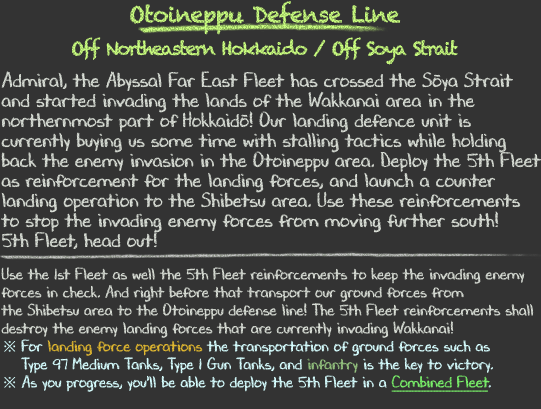
<style>
.page{position:relative;width:541px;height:409px;background:#333333}
.page>*{position:absolute;margin:0}
.t1{font:18px/36px "Chalkduster";letter-spacing:-0.09em}
.t2{font:22px/36px "Chalkduster";letter-spacing:-0.04em}
.t3{font:20px/20px "DJBChalkItUp";color:#d9ded6}
.t4{font:16px/18px "DJBChalkItUp";color:#d9ded6}
.t5{font:16px/18px "TimesNewRomanPSMT";color:#d7feff}
.t6{font:16px/18px "DJBChalkItUp";color:#d7feff}
.t7{font:16px/18px "DJBChalkItUp";color:#dfb731}
.t8{font:16px/18px "DJBChalkItUp";color:#93c07e}
.t9{font:16px/18px "DJBChalkItUp";color:#7bf26b;text-decoration:underline}
</style>
<div class="page">
<p class="t1" style="left:72px;top:1px;width:386px;height:64px;text-align:center"><span class="t2">Otoineppu Defense Line<br></span>Off Northeastern Hokkaido / Off Soya Strait</p>
<p class="t3" style="left:0px;top:71px;width:541px;height:321px">Admiral, the Abyssal Far East Fleet has crossed the Sōya Strait<br>and started invading the lands of the Wakkanai area in the<br>northernmost part of Hokkaidō! Our landing defence unit is<br>currently buying us some time with stalling tactics while holding<br>back the enemy invasion in the Otoineppu area. Deploy the 5th Fleet<br>as reinforcement for the landing forces, and launch a counter<br>landing operation to the Shibetsu area. Use these reinforcements<br>to stop the invading enemy forces from moving further south!<br>5th Fleet, head out!<br><br><span class="t4">Use the 1st Fleet as well the 5th Fleet reinforcements to keep the invading enemy<br>forces in check. And right before that transport our ground forces from<br>the Shibetsu area to the Otoineppu defense line! The 5th Fleet reinforcements shall<br>destroy the enemy landing forces that are currently invading Wakkanai!<br></span><span class="t5">※ </span><span class="t6">For </span><span class="t7">landing force operations</span><span class="t6"> the transportation of ground forces such as<br>　 Type 97 Medium Tanks, Type 1 Gun Tanks, and </span><span class="t8">infantry</span><span class="t6"> is the key to victory.<br></span><span class="t5">※ </span><span class="t6">As you progress, you'll be able to deploy the 5th Fleet in a </span><span class="t9">Combined Fleet</span><span class="t6">.</span></p>
</div>
